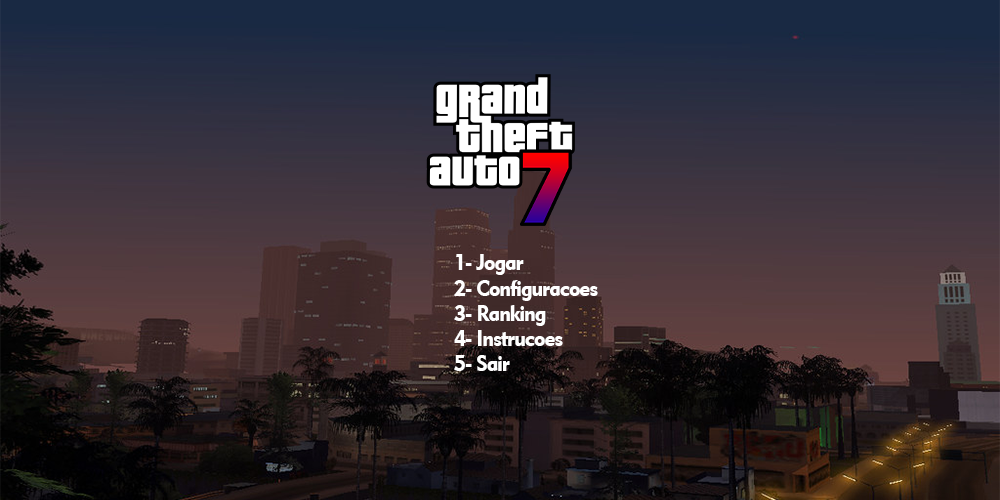
<style>
.page{position:relative;width:1000px;height:500px}
.page>*{position:absolute;margin:0}
.t1{font:22.9px "Geometric415BT-BlackA";letter-spacing:-0.05em;color:#ffffff;scale:0.92 1}
</style>
<div class="page">
<p class="t1" style="left:454px;top:254px;width:144px;height:117px">1- Jogar<br>2- Configuracoes<br>3- Ranking<br>4- Instrucoes<br>5- Sair</p>
</div>
